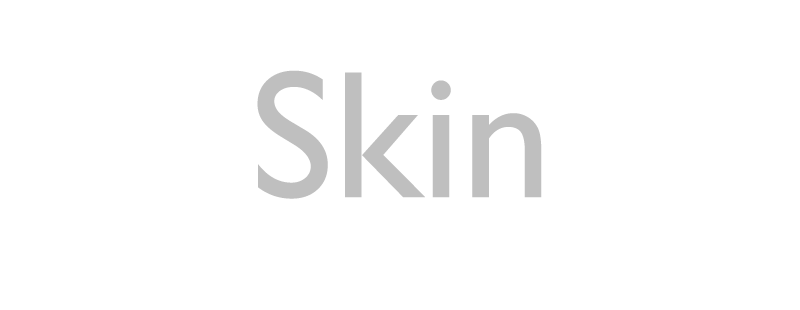
<style>
.page{position:relative;width:800px;height:310px;background:#ffffff}
.page>*{position:absolute;margin:0}
.t1{font:182.5px "GillSansMT";color:#bfbfbf}
</style>
<div class="page">
<p class="t1" style="left:257px;top:70px;width:285px;height:129px">Skin</p>
</div>
